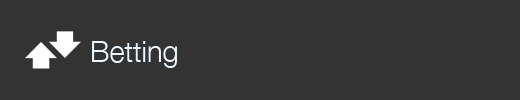
<style>
.page{position:relative;width:520px;height:100px;background:#333333}
.page>*{position:absolute;margin:0}
.t1{font:29px "HelveticaNeue-Light";color:#edf7ff}
</style>
<div class="page">
<p class="t1" style="left:92px;top:41px;width:85px;height:27px">Betting</p>
</div>
